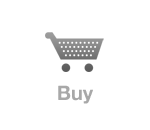
<style>
.page{position:relative;width:150px;height:130px;background:#ffffff}
.page>*{position:absolute;margin:0}
.t1{font:20px "AlteHaasGrotesk_Bold";color:#a8a8a8}
</style>
<div class="page">
<p class="t1" style="left:58px;top:85px;width:35px;height:19px">Buy</p>
</div>
